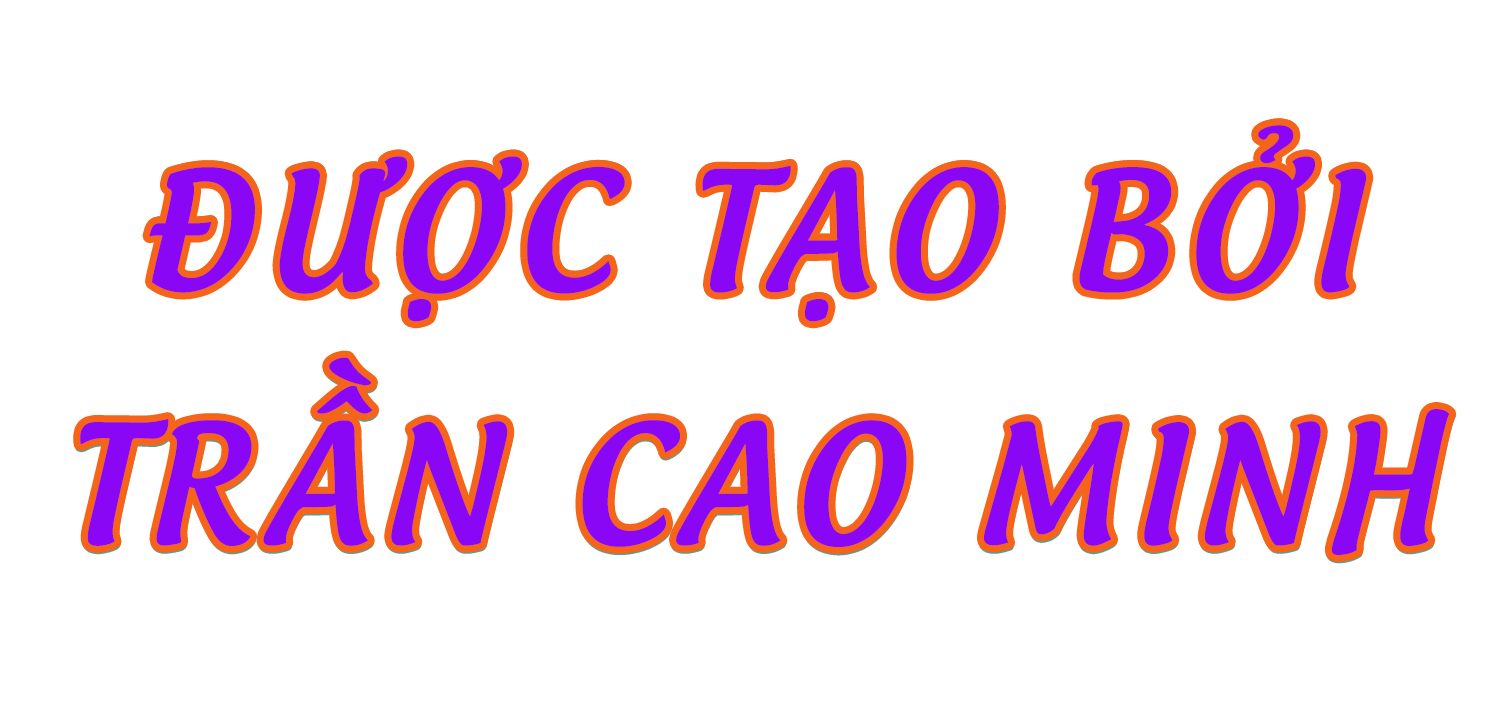
<style>
.page{position:relative;width:1500px;height:709px;background:#ffffff}
.page>*{position:absolute;margin:0}
.t1{font:156.2px/253.3px "UTM-Androgyne";letter-spacing:0.1em;color:#8a07f5}
</style>
<div class="page">
<p class="t1" style="left:80px;top:125px;width:1370px;height:430px;text-align:justify">ĐƯỢC TẠO BỞI <br>TRẦN CAO MINH</p>
</div>
